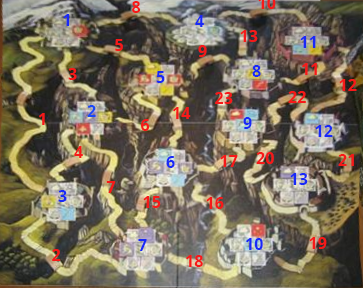
<style>
.page{position:relative;width:363px;height:288px}
.page>*{position:absolute;margin:0}
.t1{font:16px "OpenSans-Bold";color:#f71919;text-transform:uppercase}
.t2{font:16px "OpenSans-Bold";color:#1929f7;text-transform:uppercase}
.t3{font:16px "OpenSans-Bold";color:#1948f7;text-transform:uppercase}
</style>
<div class="page">
<p class="t1" style="left:132px;top:1px;width:9px;height:12px">8</p>
<p class="t2" style="left:63px;top:14px;width:7px;height:12px">1</p>
<p class="t2" style="left:195px;top:15px;width:9px;height:12px">4</p>
<p class="t1" style="left:240px;top:30px;width:18px;height:12px">13</p>
<p class="t1" style="left:115px;top:39px;width:8px;height:12px">5</p>
<p class="t2" style="left:300px;top:36px;width:16px;height:12px">11</p>
<p class="t1" style="left:198px;top:45px;width:9px;height:12px">9</p>
<p class="t2" style="left:252px;top:65px;width:9px;height:12px">8</p>
<p class="t1" style="left:302px;top:63px;width:15px;height:12px">11</p>
<p class="t1" style="left:68px;top:68px;width:9px;height:12px">3</p>
<p class="t2" style="left:156px;top:71px;width:9px;height:12px">5</p>
<p class="t1" style="left:339px;top:79px;width:18px;height:12px">12</p>
<p class="t1" style="left:215px;top:92px;width:18px;height:12px">23</p>
<p class="t1" style="left:288px;top:91px;width:18px;height:12px">22</p>
<p class="t1" style="left:39px;top:113px;width:6px;height:12px">1</p>
<p class="t3" style="left:87px;top:105px;width:9px;height:12px">2</p>
<p class="t1" style="left:173px;top:107px;width:18px;height:12px">14</p>
<p class="t1" style="left:141px;top:119px;width:9px;height:12px">6</p>
<p class="t2" style="left:243px;top:117px;width:9px;height:12px">9</p>
<p class="t2" style="left:315px;top:125px;width:18px;height:12px">12</p>
<p class="t1" style="left:74px;top:146px;width:9px;height:12px">4</p>
<p class="t2" style="left:166px;top:156px;width:9px;height:12px">6</p>
<p class="t1" style="left:220px;top:155px;width:18px;height:12px">17</p>
<p class="t1" style="left:256px;top:152px;width:18px;height:12px">20</p>
<p class="t1" style="left:338px;top:154px;width:16px;height:12px">21</p>
<p class="t2" style="left:290px;top:173px;width:18px;height:12px">13</p>
<p class="t1" style="left:106px;top:181px;width:10px;height:12px">7</p>
<p class="t2" style="left:58px;top:190px;width:9px;height:12px">3</p>
<p class="t1" style="left:143px;top:196px;width:18px;height:12px">15</p>
<p class="t1" style="left:206px;top:197px;width:18px;height:12px">16</p>
<p class="t2" style="left:138px;top:239px;width:9px;height:12px">7</p>
<p class="t2" style="left:246px;top:238px;width:17px;height:12px">10</p>
<p class="t1" style="left:309px;top:237px;width:18px;height:12px">19</p>
<p class="t1" style="left:52px;top:249px;width:9px;height:12px">2</p>
<p class="t1" style="left:186px;top:255px;width:17px;height:12px">18</p>
</div>
